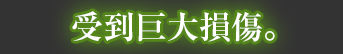
<style>
.page{position:relative;width:343px;height:54px;background:#333333}
.page>*{position:absolute;margin:0}
.t1{font:32px "RyuminPr6N-Bold";color:#ffffff}
</style>
<div class="page">
<p class="t1" style="left:72px;top:11px;width:203px;height:31px">受到巨大損傷。</p>
</div>
